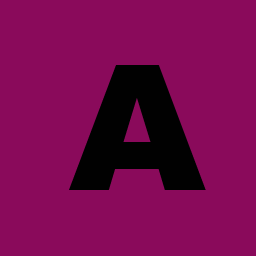
<style>
.page{position:relative;width:256px;height:256px;background:#8a0a5b}
.page>*{position:absolute;margin:0}
.t1{font:174.7px "Arial-Black";color:#010101}
</style>
<div class="page">
<p class="t1" style="left:69px;top:65px;width:137px;height:125px">A</p>
</div>
